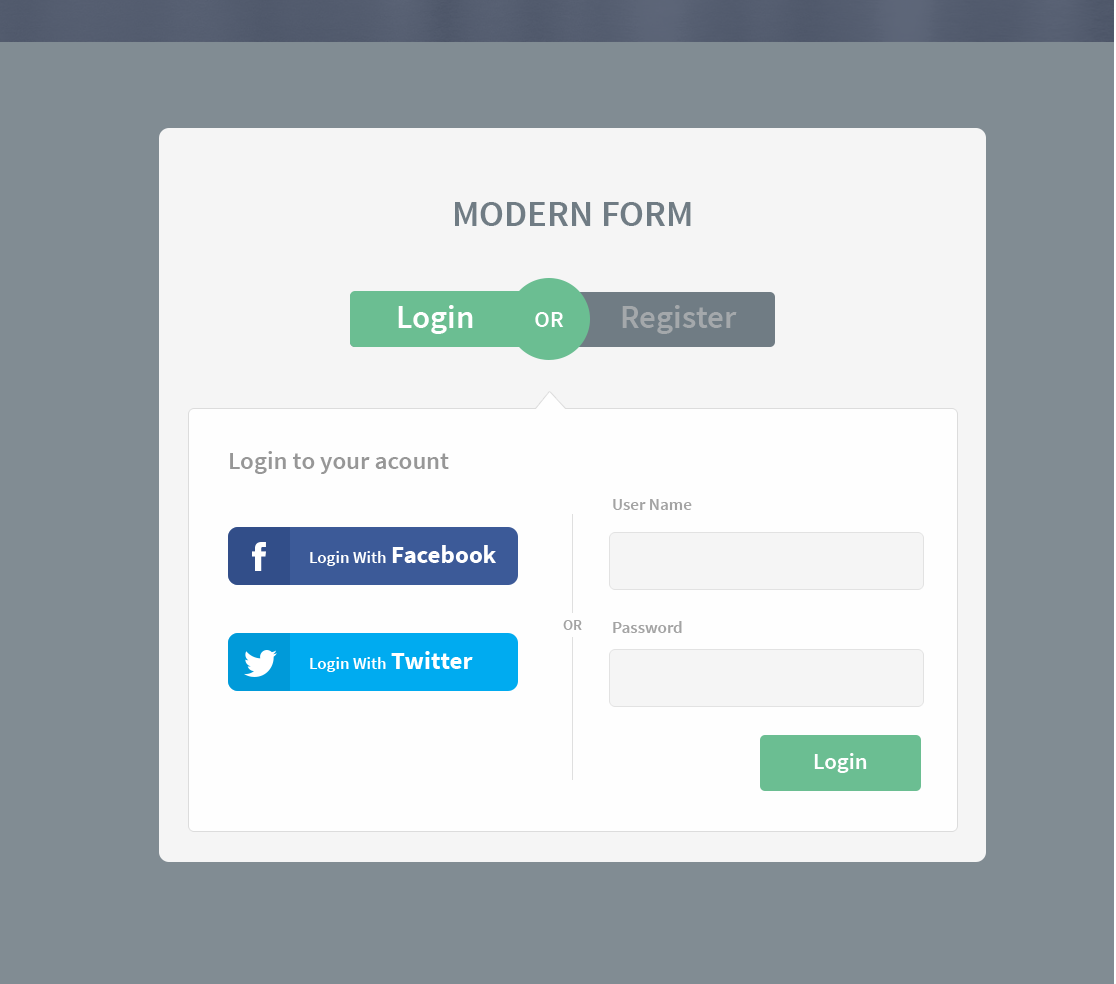
<style>
.page{position:relative;width:1116px;height:984px;background:#818c93}
.page>*{position:absolute;margin:0}
.t1{font:37px "SourceSansPro-Semibold";color:#707c84;text-transform:uppercase}
.t2{font:33px "SourceSansPro-Semibold";color:#ffffff}
.t3{font:33px "SourceSansPro-Semibold";color:#a4a8ab}
.t4{font:23.3px "SourceSansPro-Semibold";color:#ffffff}
.t5{font:25px "SourceSansPro-Semibold";color:#979797}
.t6{font:17px "SourceSansPro-Semibold";color:#a3a3a3}
.t7{font:17px "SourceSansPro-Semibold";color:#ffffff}
.t8{font:25px "SourceSansPro-Bold";color:#ffffff}
.t9{font:15px "SourceSansPro-Semibold";color:#a3a3a3}
.t10{font:23px "SourceSansPro-Semibold";color:#ffffff}
</style>
<div class="page">
<p class="t1" style="left:455px;top:202px;width:236px;height:24px">Modern Form</p>
<p class="t2" style="left:398px;top:305px;width:75px;height:29px">Login</p>
<p class="t3" style="left:622px;top:305px;width:115px;height:29px">Register</p>
<p class="t4" style="left:535px;top:312px;width:29px;height:15px">OR</p>
<p class="t5" style="left:230px;top:451px;width:219px;height:23px">Login to your acount</p>
<p class="t6" style="left:613px;top:499px;width:79px;height:11px">User Name</p>
<p class="t7" style="left:310px;top:545px;width:186px;height:21px">Login With <span class="t8">Facebook</span></p>
<p class="t9" style="left:563px;top:620px;width:19px;height:10px">OR</p>
<p class="t6" style="left:613px;top:621px;width:69px;height:12px">Password</p>
<p class="t7" style="left:310px;top:651px;width:163px;height:21px">Login With <span class="t8">Twitter</span></p>
<p class="t10" style="left:814px;top:753px;width:53px;height:20px">Login</p>
</div>
